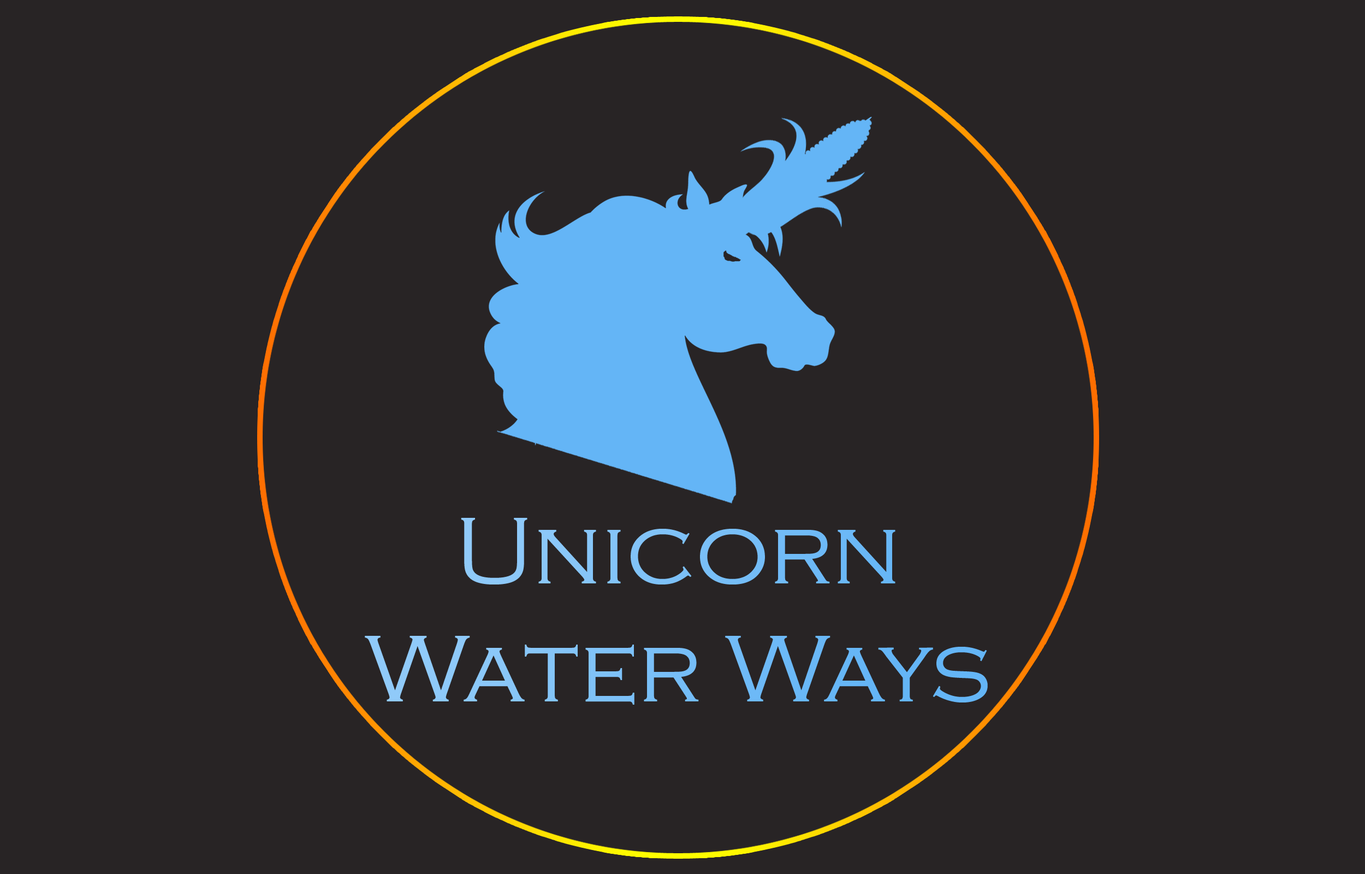
<style>
.page{position:relative;width:1365px;height:874px;background:#282425}
.page>*{position:absolute;margin:0}
.t1{font:98.3px "CopperplateGothic-Light";color:#7abff7}
</style>
<div class="page">
<p class="t1" style="left:365px;top:518px;width:623px;height:186px;text-align:center">Unicorn<br>Water Ways</p>
</div>
